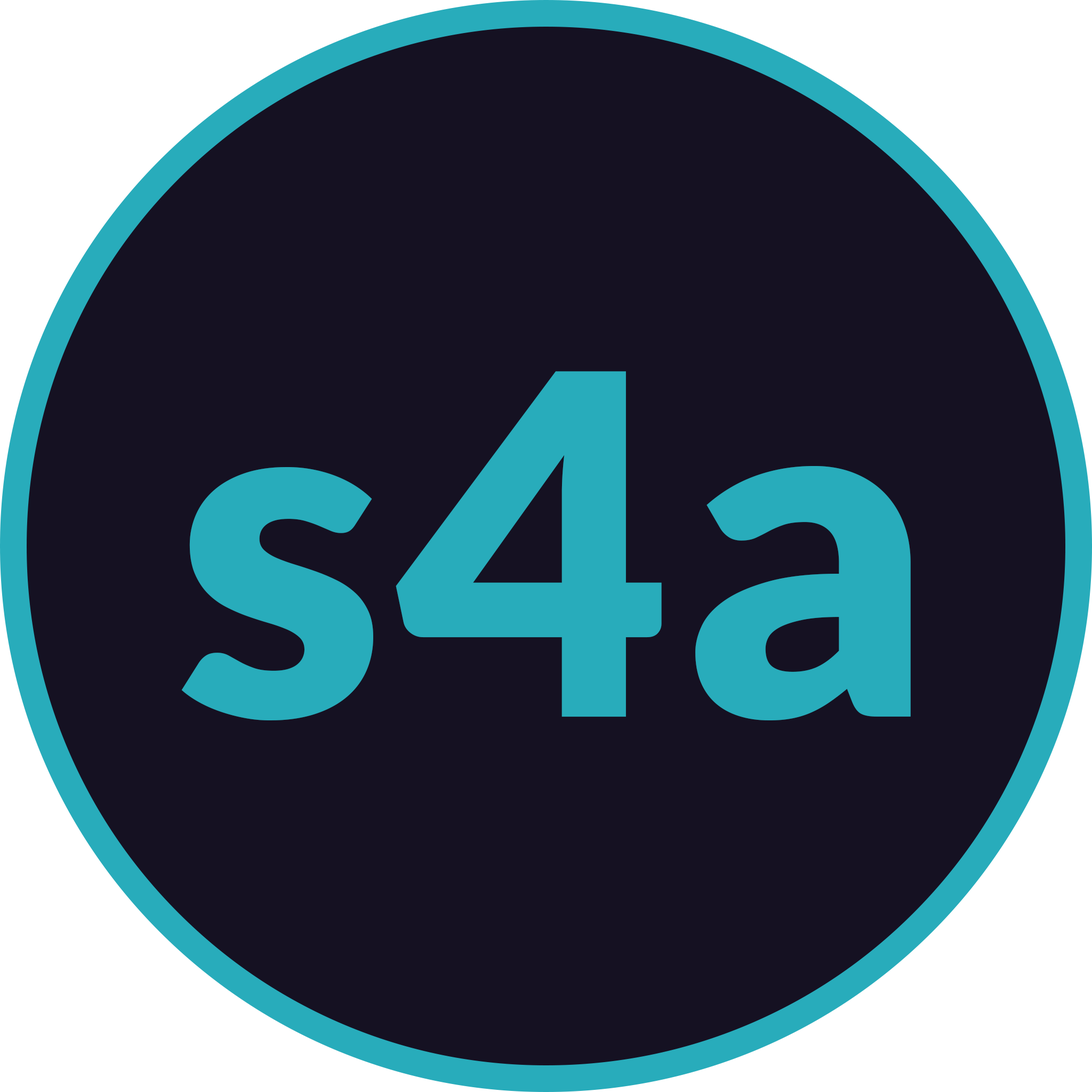
<style>
.page{position:relative;width:1092px;height:1092px;background:#151122}
.page>*{position:absolute;margin:0}
.t1{font:473.7px "Lato-Black";letter-spacing:0.02em;color:#28acbb}
</style>
<div class="page">
<p class="t1" style="left:181px;top:371px;width:730px;height:349px">s4a</p>
</div>
